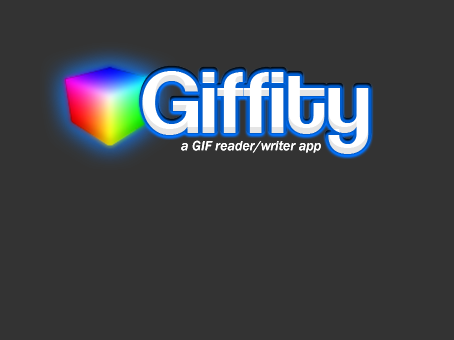
<style>
.page{position:relative;width:454px;height:340px;background:#333333}
.page>*{position:absolute;margin:0}
.t1{font:90px "CoolveticaRg-Regular";color:#ffffff}
.t2{font:14px "FranklinGothic-MediumItalic";color:#fefefe}
</style>
<div class="page">
<p class="t1" style="left:142px;top:71px;width:227px;height:83px">Giffity</p>
<p class="t2" style="left:181px;top:140px;width:140px;height:13px">a GIF reader/writer app</p>
</div>
